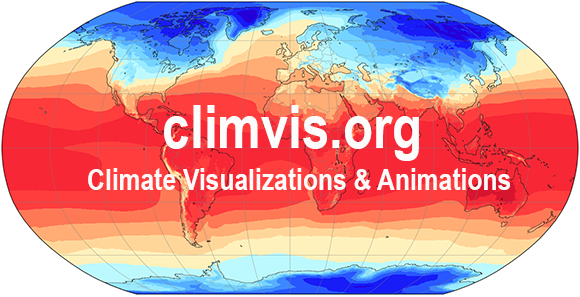
<style>
.page{position:relative;width:580px;height:297px}
.page>*{position:absolute;margin:0}
.t1{font:60px "ArialNarrow-Bold";color:#fdfcfc}
.t2{font:30px "ArialNarrow-Bold";color:#fcf9f9}
</style>
<div class="page">
<p class="t1" style="left:164px;top:105px;width:255px;height:56px">climvis.org</p>
<p class="t2" style="left:88px;top:168px;width:422px;height:22px">Climate Visualizations &amp; Animations</p>
</div>
